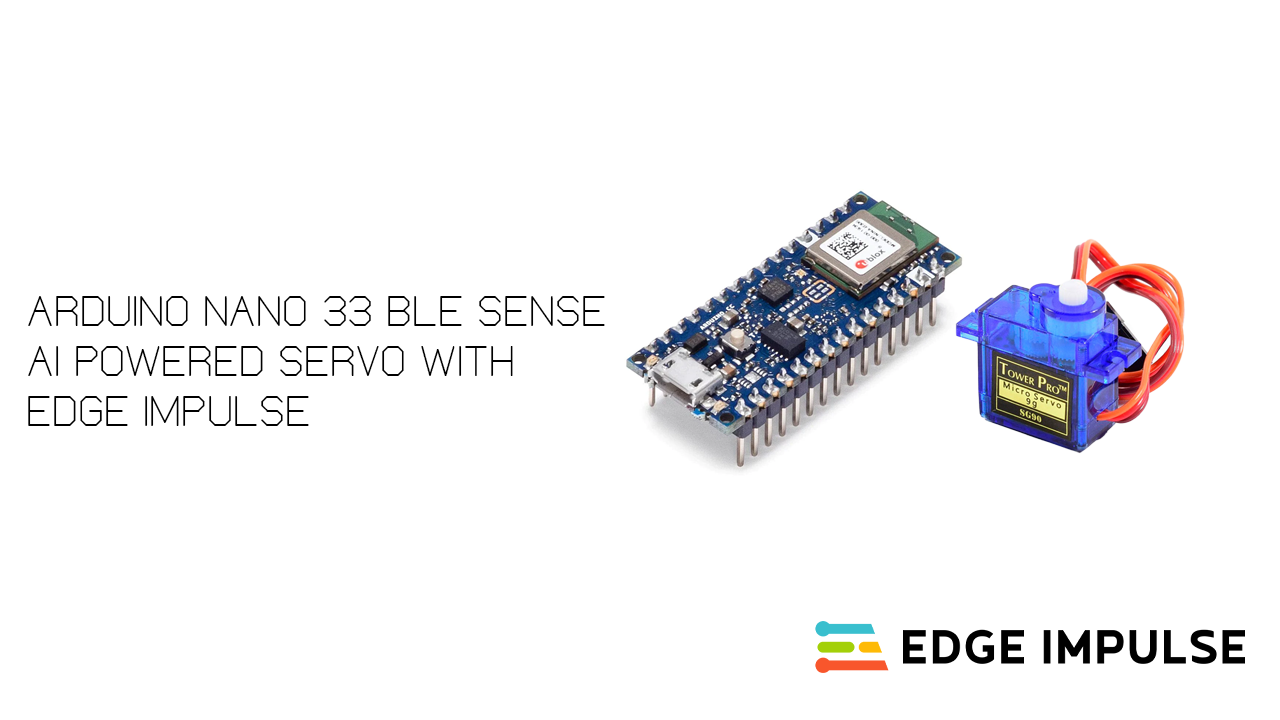
<style>
.page{position:relative;width:1280px;height:720px;background:#ffffff}
.page>*{position:absolute;margin:0}
.t1{font:50px/50px "ElgethySquareUpper";color:#000000;text-transform:uppercase}
</style>
<div class="page">
<p class="t1" style="left:28px;top:296px;width:577px;height:130px">Arduino Nano 33 BLE SENSE <br>AI Powered Servo With <br>Edge Impulse</p>
</div>
